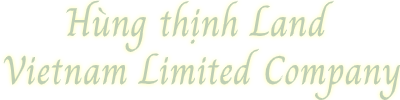
<style>
.page{position:relative;width:400px;height:100px;background:#ffffff}
.page>*{position:absolute;margin:0}
.t1{font:40px "Charm-Regular";color:#beceb4}
</style>
<div class="page">
<p class="t1" style="left:3px;top:0px;width:397px;height:100px;text-align:center">Hùng thịnh Land <br>Vietnam Limited Company</p>
</div>
